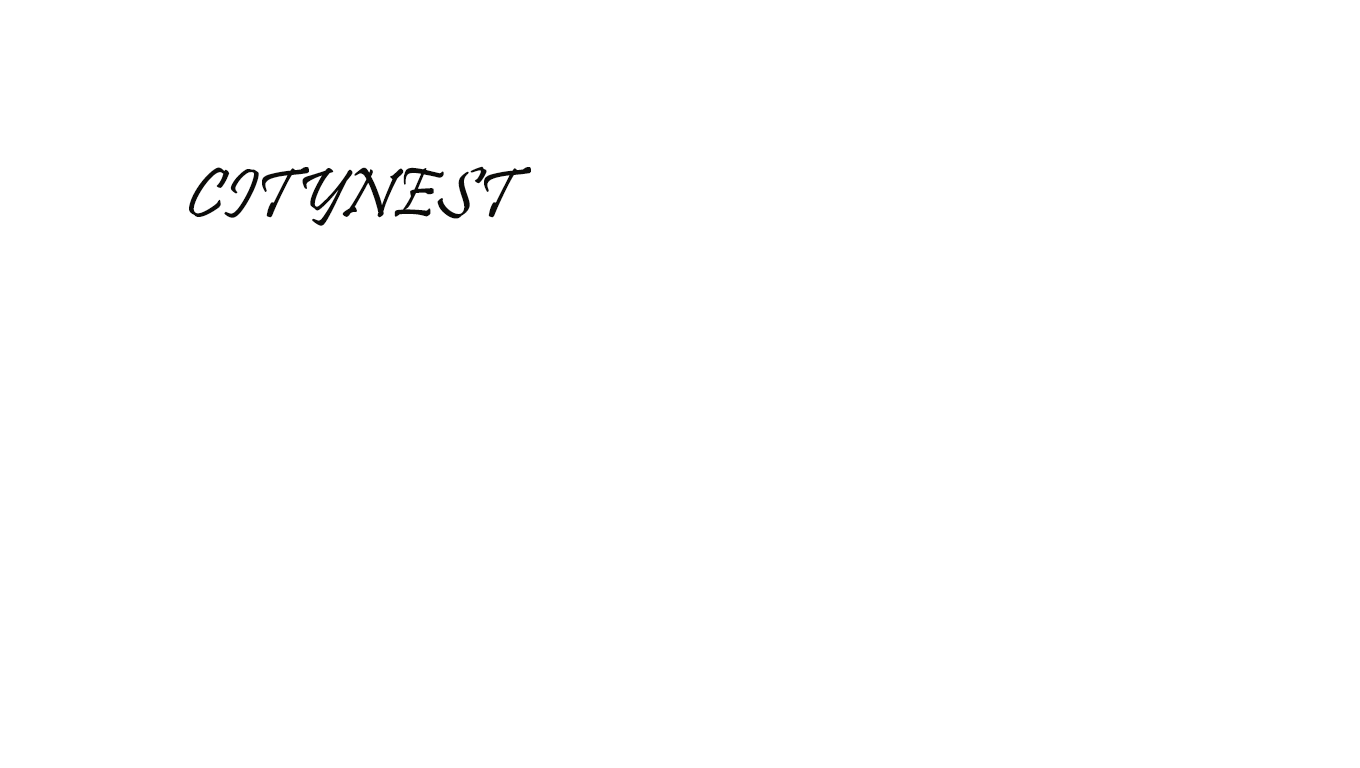
<style>
.page{position:relative;width:1360px;height:768px;background:#ffffff}
.page>*{position:absolute;margin:0}
.t1{font:72px "Pristina-Regular";color:#0c0c0a;font-style:italic}
</style>
<div class="page">
<p class="t1" style="left:189px;top:166px;width:342px;height:60px">CITYNEST</p>
</div>
